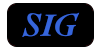
<style>
.page{position:relative;width:100px;height:50px;background:#000000}
.page>*{position:absolute;margin:0}
.t1{font:36px "TimesNewRomanPS-BoldItalicMT";color:#3665db}
</style>
<div class="page">
<p class="t1" style="left:22px;top:12px;width:58px;height:25px">SIG</p>
</div>
